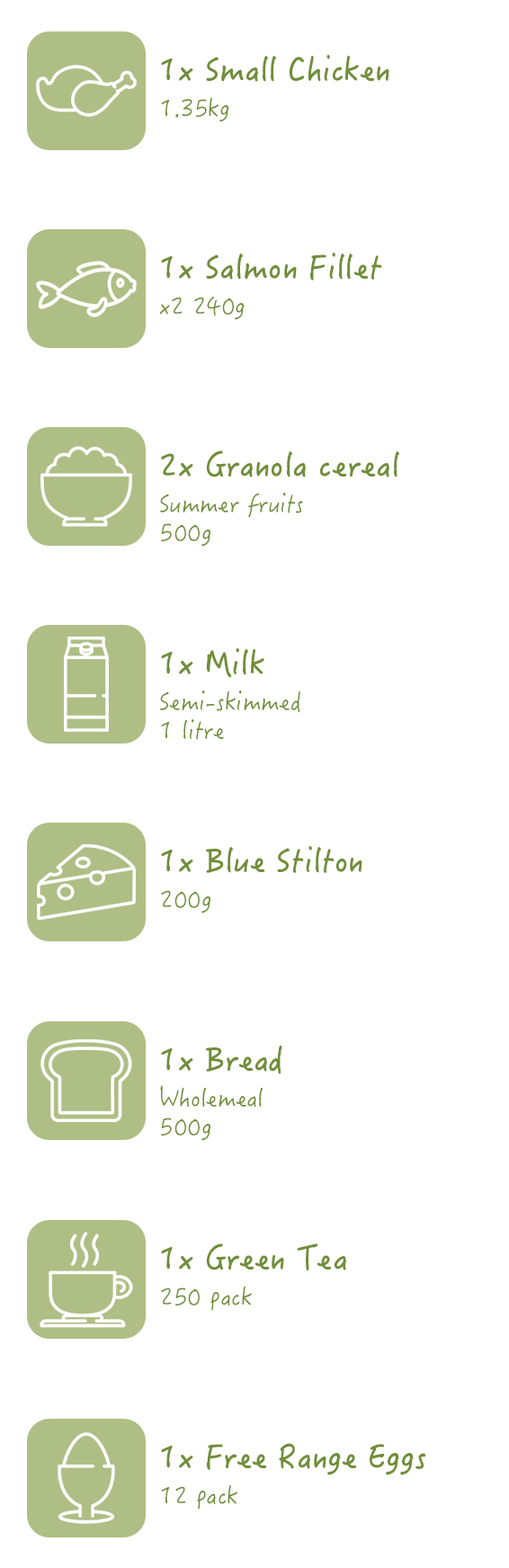
<style>
.page{position:relative;width:509px;height:1568px;background:#ffffff}
.page>*{position:absolute;margin:0}
.t1{font:32.6px "HanziPenTC-W5";color:#708e38}
.t2{font:24.4px "HanziPenTC-W3";color:#708e38}
.t3{font:24.4px/28.5px "HanziPenTC-W3";color:#708e38}
</style>
<div class="page">
<p class="t1" style="left:161px;top:55px;width:228px;height:27px">1x Small Chicken</p>
<p class="t2" style="left:161px;top:97px;width:68px;height:25px">1.35kg</p>
<p class="t1" style="left:161px;top:253px;width:221px;height:28px">1x Salmon Fillet</p>
<p class="t2" style="left:159px;top:297px;width:86px;height:23px">x2 240g</p>
<p class="t1" style="left:161px;top:450px;width:238px;height:27px">2x Granola cereal</p>
<p class="t3" style="left:160px;top:493px;width:143px;height:54px">Summer fruits<br>500g</p>
<p class="t1" style="left:161px;top:648px;width:103px;height:30px">1x Milk</p>
<p class="t3" style="left:160px;top:690px;width:140px;height:50px">Semi-skimmed<br>1 litre</p>
<p class="t1" style="left:161px;top:846px;width:201px;height:27px">1x Blue Stilton</p>
<p class="t2" style="left:161px;top:890px;width:50px;height:23px">200g</p>
<p class="t1" style="left:161px;top:1046px;width:121px;height:28px">1x Bread</p>
<p class="t3" style="left:160px;top:1085px;width:103px;height:56px">Wholemeal<br>500g</p>
<p class="t1" style="left:161px;top:1243px;width:185px;height:27px">1x Green Tea</p>
<p class="t2" style="left:161px;top:1286px;width:91px;height:25px">250 pack</p>
<p class="t1" style="left:161px;top:1443px;width:265px;height:32px">1x Free Range Eggs</p>
<p class="t2" style="left:161px;top:1484px;width:76px;height:26px">12 pack</p>
</div>
